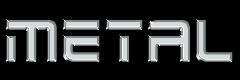
<style>
.page{position:relative;width:240px;height:80px;background:#000000}
.page>*{position:absolute;margin:0}
.t1{font:60px "2015Cruiser";letter-spacing:-0.025em}
</style>
<div class="page">
<p class="t1" style="left:7px;top:20px;width:226px;height:41px">Metal</p>
</div>
